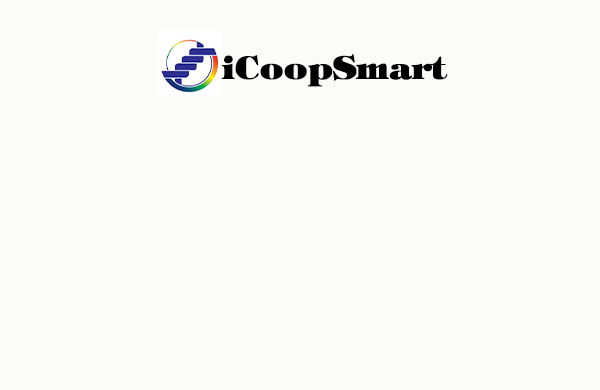
<style>
.page{position:relative;width:600px;height:390px;background:#fcfbf8}
.page>*{position:absolute;margin:0}
.t1{font:48px "DSUKrungKaSame";color:#000000}
</style>
<div class="page">
<p class="t1" style="left:221px;top:53px;width:227px;height:34px">iCoopSmart</p>
</div>
